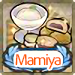
<style>
.page{position:relative;width:75px;height:75px}
.page>*{position:absolute;margin:0}
.t1{font:16px "AdobeClean-Regular";letter-spacing:-0.08em;color:#ff5a00}
</style>
<div class="page">
<p class="t1" style="left:15px;top:54px;width:46px;height:15px">Mamiya</p>
</div>
